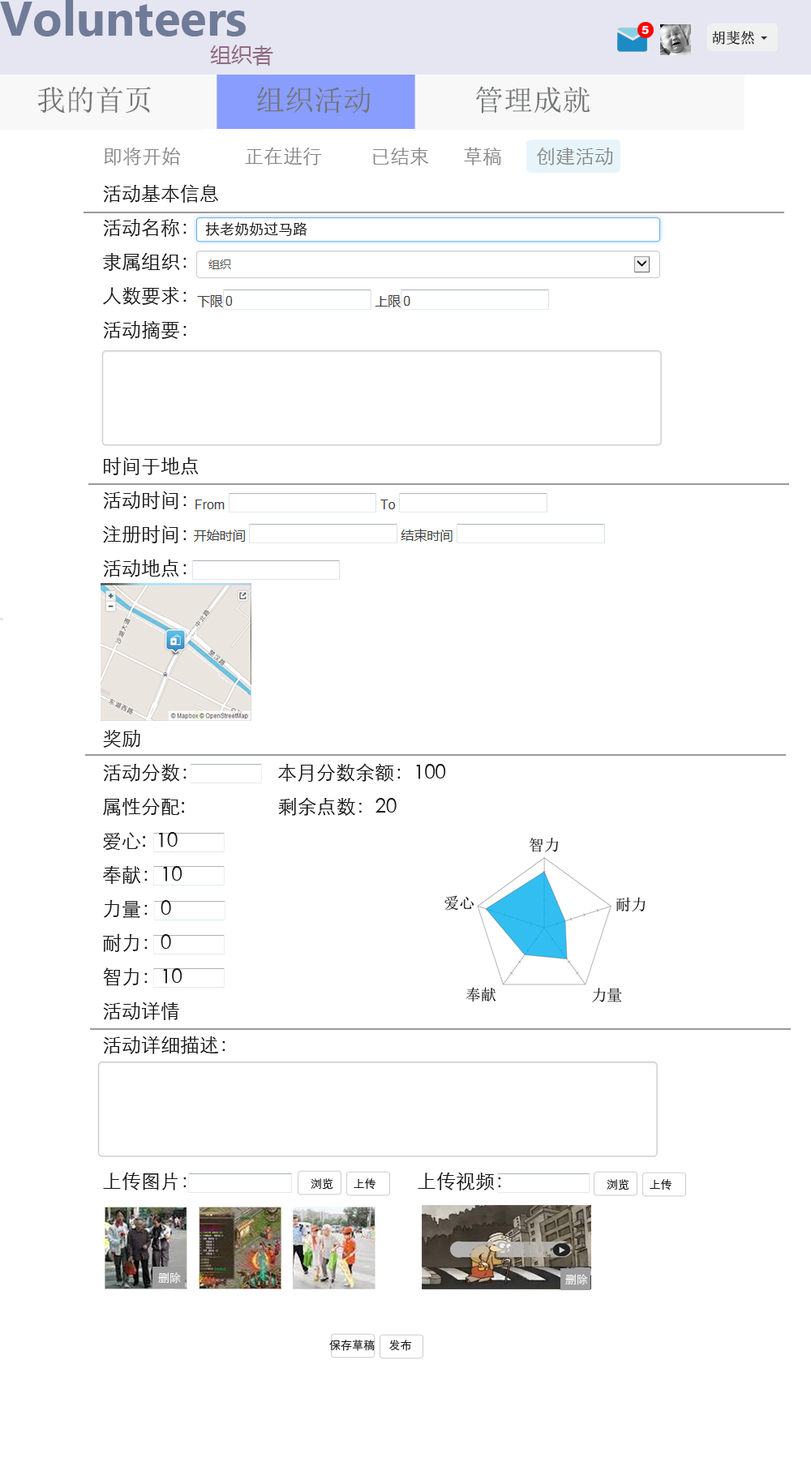
<style>
.page{position:relative;width:811px;height:1471px;background:#ffffff}
.page>*{position:absolute;margin:0}
.t1{font:11.4px "Arial-Black";color:#ffffff}
.t2{font:14.6px "SimSun";color:#141414}
.t3{font:21.1px "MicrosoftYaHei";color:#926c82}
.t4{font:29.2px "SimSun";color:#717273}
.t5{font:19.5px "STXihei";color:#878787}
.t6{font:19.5px "STXihei";color:#33aafd}
.t7{font:19.5px "STXihei";color:#171717}
.t8{font:14.6px "STXihei";color:#171717}
.t9{font:11.4px "STXihei";color:#171717}
</style>
<div class="page">
<p class="t1" style="left:641px;top:26px;width:8px;height:8px">5</p>
<p class="t2" style="left:712px;top:31px;width:42px;height:14px">胡斐然</p>
<p class="t3" style="left:210px;top:45px;width:63px;height:21px">组织者</p>
<p class="t4" style="left:37px;top:86px;width:553px;height:28px">我的首页       组织活动       管理成就</p>
<p class="t5" style="left:104px;top:147px;width:509px;height:18px"><span class="t6">        </span>即将开始             正在进行          已结束       草稿       创建活动</p>
<p class="t7" style="left:102px;top:184px;width:399px;height:1006px">活动基本信息<br>活动名称：<br>隶属组织：<br>人数要求：<br>活动摘要：<br><br><br><br>时间于地点<br>活动时间：<br>注册时间：<br>活动地点：<br><br><br><br><br>奖励<br>活动分数：                本月分数余额：100<br>属性分配:                   剩余点数：20<br>爱心:  10<br>奉献：10<br>力量：0<br>耐力：0<br>智力：10<br>活动详情<br>活动详细描述：<br><br><br><br>上传图片：                                                上传视频：</p>
<p class="t8" style="left:205px;top:222px;width:102px;height:14px">扶老奶奶过马路</p>
<p class="t9" style="left:329px;top:1339px;width:82px;height:12px">保存草稿     发布</p>
</div>
